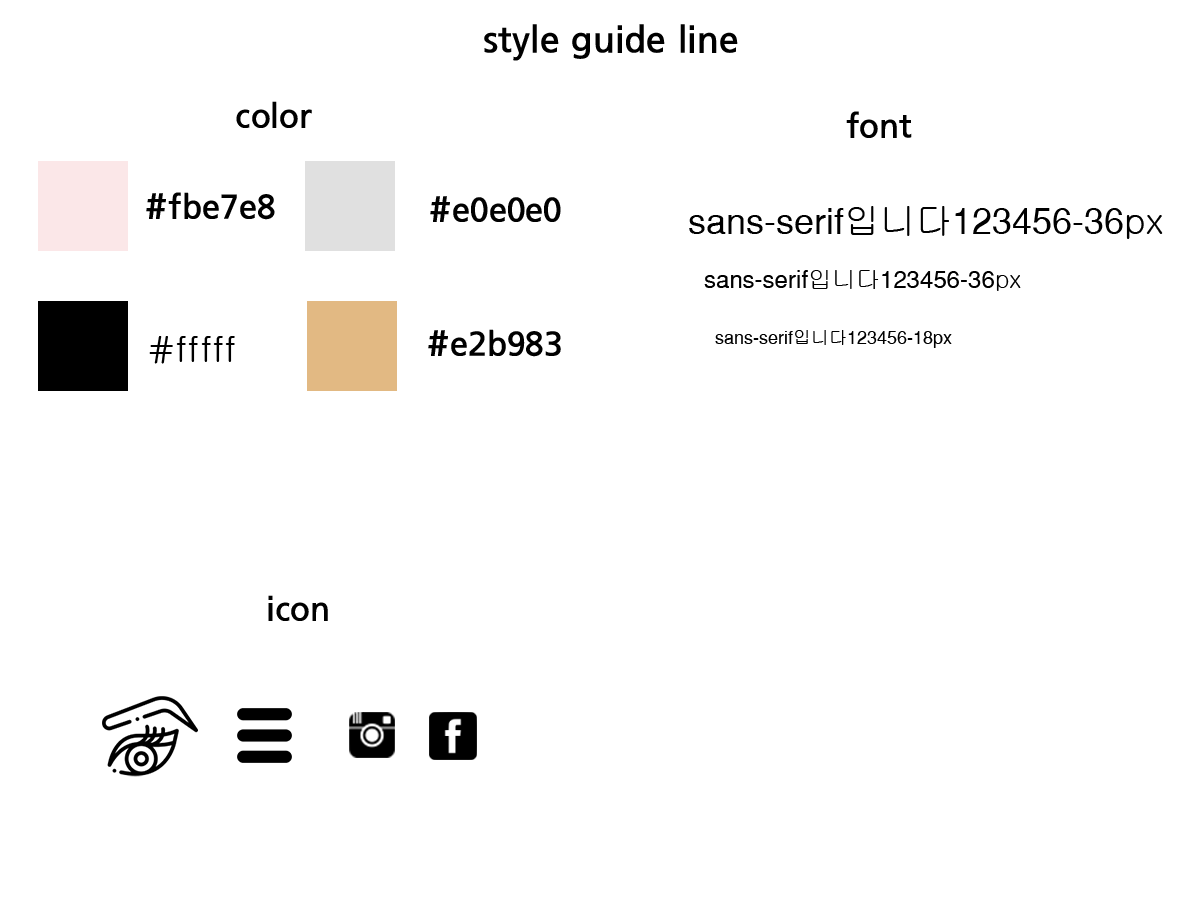
<style>
.page{position:relative;width:1200px;height:900px;background:#ffffff}
.page>*{position:absolute;margin:0}
.t1{font:39px "BRR";color:#000000}
.t2{font:36px "BRR";color:#000000}
.t3{font:36px "BRR";color:#010101}
.t4{font:36px "SansSerif";color:#000000}
.t5{font:36px "Gulim";color:#000000}
.t6{font:24px "SansSerif";color:#000000}
.t7{font:24px "Gulim";color:#000000}
.t8{font:18px "SansSerif";color:#000000}
.t9{font:18px "Gulim";color:#000000}
</style>
<div class="page">
<p class="t1" style="left:484px;top:24px;width:254px;height:37px">style guide line</p>
<p class="t2" style="left:236px;top:101px;width:76px;height:27px">color</p>
<p class="t2" style="left:846px;top:111px;width:66px;height:27px">font</p>
<p class="t2" style="left:146px;top:192px;width:129px;height:28px">#fbe7e8</p>
<p class="t3" style="left:430px;top:196px;width:131px;height:26px">#e0e0e0</p>
<p class="t4" style="left:689px;top:206px;width:474px;height:33px">sans-serif<span class="t5">입니다</span>123456-36<span class="t5">px</span></p>
<p class="t6" style="left:704px;top:270px;width:317px;height:21px">sans-serif<span class="t7">입니다</span>123456-36<span class="t7">px</span></p>
<p class="t2" style="left:428px;top:329px;width:133px;height:28px">#e2b983</p>
<p class="t5" style="left:149px;top:336px;width:86px;height:28px">#fffff</p>
<p class="t8" style="left:715px;top:330px;width:237px;height:18px">sans-serif<span class="t9">입니다</span>123456-18px</p>
<p class="t2" style="left:268px;top:595px;width:60px;height:26px">icon</p>
</div>
